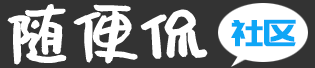
<style>
.page{position:relative;width:315px;height:68px;background:#333333}
.page>*{position:absolute;margin:0}
.t1{font:72px "Muyao-Softbrush";letter-spacing:-0.075em;color:#ffffff;font-weight:bold}
.t2{font:36px "PangMenZhengDao";letter-spacing:-0.075em;color:#0ea6f6;font-weight:bold}
</style>
<div class="page">
<p class="t1" style="left:7px;top:4px;width:201px;height:61px">随便侃</p>
<p class="t2" style="left:231px;top:19px;width:65px;height:28px">社区</p>
</div>
